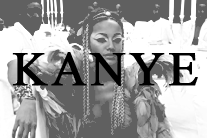
<style>
.page{position:relative;width:207px;height:138px;background:#606060}
.page>*{position:absolute;margin:0}
.t1{font:48px "TimesNewRomanPSMT";letter-spacing:0.06em;color:#000000;font-weight:bold}
</style>
<div class="page">
<p class="t1" style="left:12px;top:52px;width:186px;height:34px">KANYE</p>
</div>
